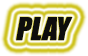
<style>
.page{position:relative;width:88px;height:56px}
.page>*{position:absolute;margin:0}
.t1{font:29px "Impact";color:#000000;font-style:italic}
</style>
<div class="page">
<p class="t1" style="left:16px;top:17px;width:57px;height:24px;opacity:0.95">PLAY</p>
</div>
